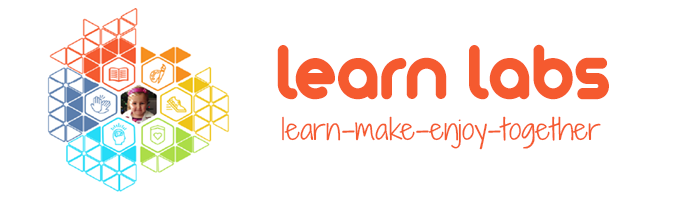
<style>
.page{position:relative;width:700px;height:200px;background:#ffffff}
.page>*{position:absolute;margin:0}
.t1{font:85.2px "zArista";color:#f55a2f;scale:0.95 1}
.t2{font:28px "ShadowsIntoLight";color:#f55a2f;scale:1.14 1}
</style>
<div class="page">
<p class="t1" style="left:277px;top:44px;width:332px;height:56px">learn labs</p>
<p class="t2" style="left:282px;top:116px;width:319px;height:34px">learn-make-enjoy-together</p>
</div>
